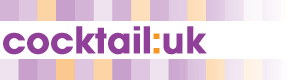
<style>
.page{position:relative;width:300px;height:80px;background:#ffffff}
.page>*{position:absolute;margin:0}
.t1{font:36px "Atlanta-Demi";color:#904098;font-weight:bold}
.t2{font:36px "Atlanta-Demi";color:#f79523;font-weight:bold}
</style>
<div class="page">
<p class="t1" style="left:3px;top:26px;width:204px;height:29px">cocktail<span class="t2">:</span>uk</p>
</div>
